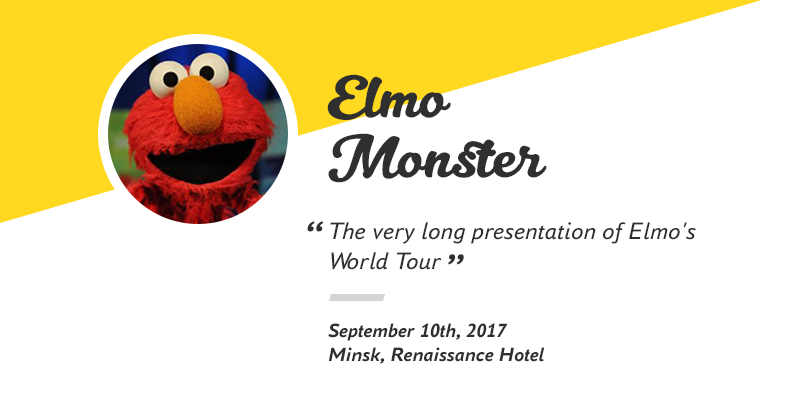
<style>
.page{position:relative;width:800px;height:418px;background:#ffffff}
.page>*{position:absolute;margin:0}
.t1{font:60px/60px "KittenSwash";color:#302f2f}
.t2{font:50px "PTAstraSans-Italic";color:#302f2f}
.t3{font:25px "PTAstraSans-Italic";color:#302f2f}
.t4{font:20px "PTAstraSans-BoldItalic";color:#302f2f}
</style>
<div class="page">
<p class="t1" style="left:327px;top:74px;width:220px;height:109px">Elmo<br>Monster</p>
<p class="t2" style="left:307px;top:221px;width:17px;height:11px">“</p>
<p class="t3" style="left:330px;top:222px;width:366px;height:48px">The very long presentation of Elmo's World Tour</p>
<p class="t2" style="left:448px;top:254px;width:16px;height:11px">”</p>
<p class="t4" style="left:328px;top:323px;width:217px;height:41px">September 10th, 2017<br>Minsk, Renaissance Hotel</p>
</div>
